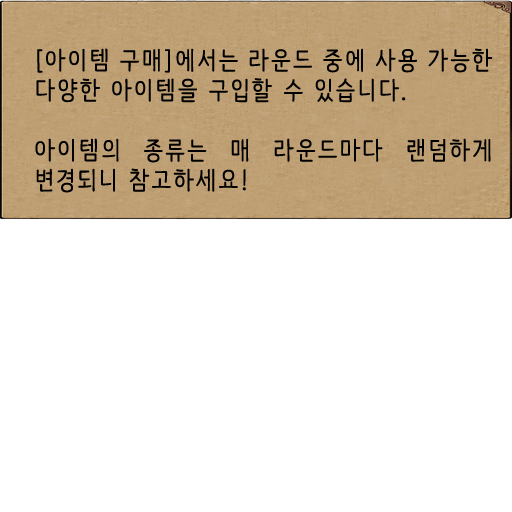
<style>
.page{position:relative;width:512px;height:512px;background:#ffffff}
.page>*{position:absolute;margin:0}
.t1{font:25px "NanumBarunpen";letter-spacing:0.075em;color:#000000;font-weight:bold}
</style>
<div class="page">
<p class="t1" style="left:35px;top:48px;width:458px;height:145px;text-align:justify">[아이템 구매]에서는 라운드 중에 사용 가능한 다양한 아이템을 구입할 수 있습니다.<br><br>아이템의 종류는 매 라운드마다 랜덤하게 변경되니 참고하세요!</p>
</div>
